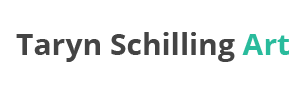
<style>
.page{position:relative;width:306px;height:94px;background:#ffffff}
.page>*{position:absolute;margin:0}
.t1{font:30px "OpenSans-Bold";color:#444444}
.t2{font:30px "OpenSans-Bold";color:#29bb9c}
</style>
<div class="page">
<p class="t1" style="left:16px;top:32px;width:273px;height:30px">Taryn Schilling <span class="t2">Art</span></p>
</div>
